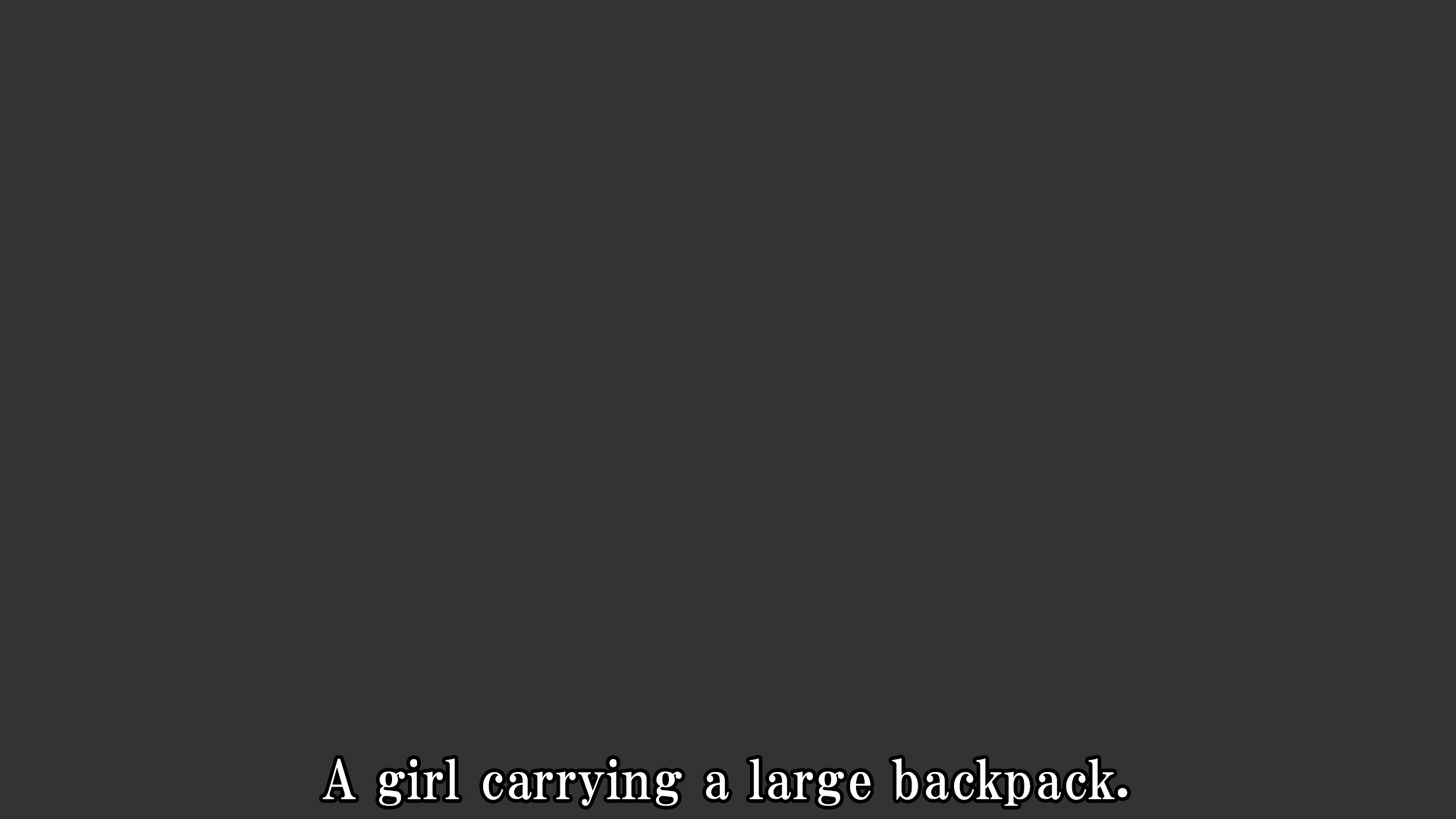
<style>
.page{position:relative;width:1456px;height:819px;background:#333333}
.page>*{position:absolute;margin:0}
.t1{font:53.1px "HGPMinchoE";letter-spacing:0.025em;color:#ffffff}
</style>
<div class="page">
<p class="t1" style="left:322px;top:758px;width:806px;height:48px">A girl carrying a large backpack.</p>
</div>
